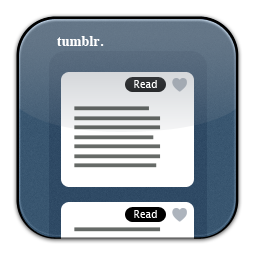
<style>
.page{position:relative;width:255px;height:255px;background:#ffffff}
.page>*{position:absolute;margin:0}
.t1{font:14px "Times-Bold";letter-spacing:0.01em;color:#ffffff}
.t2{font:10px "LucidaGrande";letter-spacing:0.01em;color:#ffffff}
</style>
<div class="page">
<p class="t1" style="left:57px;top:36px;width:47px;height:10px">tumblr.</p>
<p class="t2" style="left:134px;top:80px;width:23px;height:8px">Read</p>
<p class="t2" style="left:134px;top:210px;width:23px;height:8px">Read</p>
</div>
